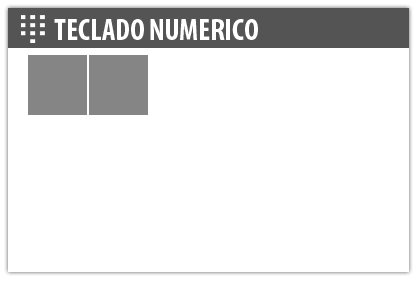
<style>
.page{position:relative;width:415px;height:283px;background:#ffffff}
.page>*{position:absolute;margin:0}
.t1{font:30px "MyriadPro-BoldCond";color:#ffffff}
</style>
<div class="page">
<p class="t1" style="left:54px;top:19px;width:204px;height:21px">TECLADO NUMERICO</p>
</div>
